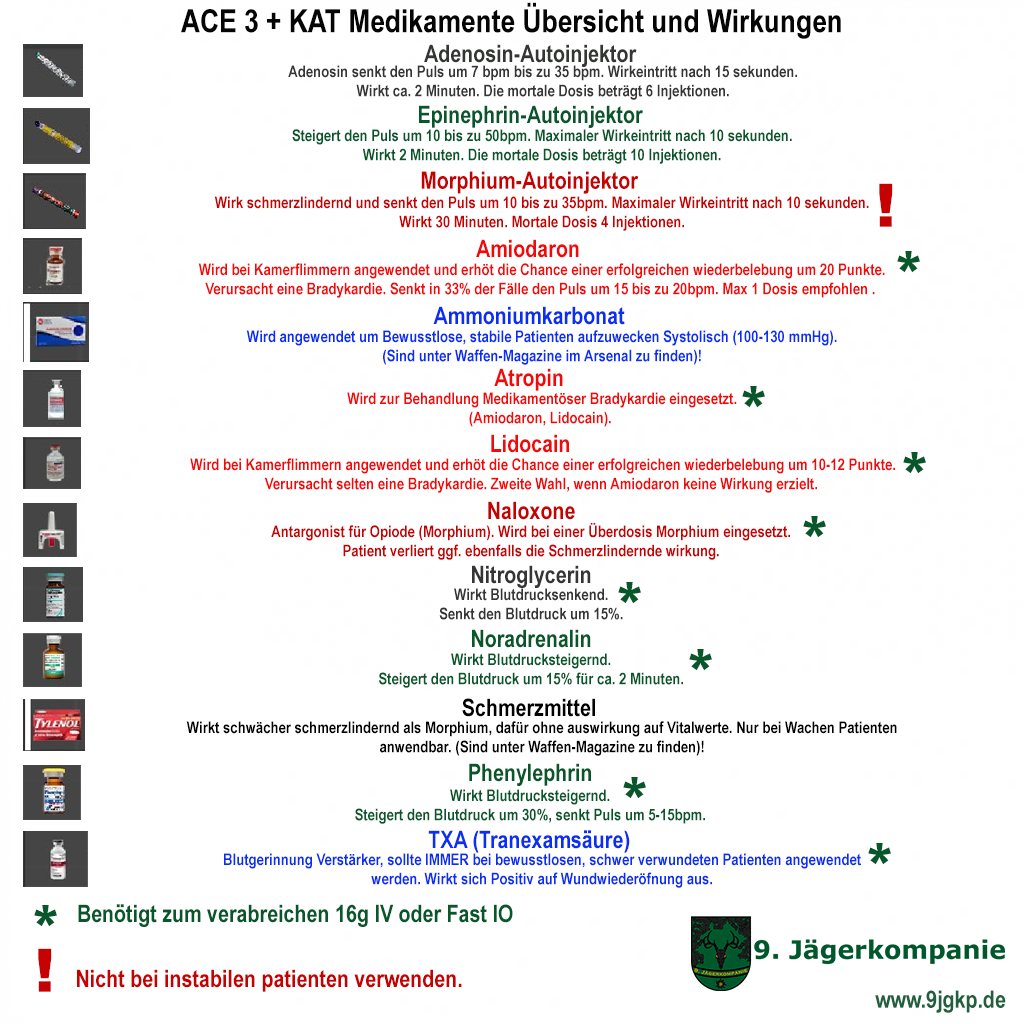
<style>
.page{position:relative;width:1024px;height:1024px;background:#ffffff}
.page>*{position:absolute;margin:0}
.t1{font:32.1px "ArialNarrow-Bold";color:#040504}
.t2{font:24px "ArialNarrow-Bold";color:#333633}
.t3{font:16px "ArialNarrow-Bold";color:#333633}
.t4{font:24px "ArialNarrow-Bold";color:#06572b}
.t5{font:16px "ArialNarrow-Bold";color:#06582b}
.t6{font:24px "ArialNarrow-Bold";color:#c60101}
.t7{font:60px "Arial-Black";color:#c60101}
.t8{font:16px "ArialNarrow-Bold";color:#c60101}
.t9{font:24px "ArialNarrow-Bold";color:#f20909}
.t10{font:60px "Arial-Black";color:#06582b}
.t11{font:16px "ArialNarrow-Bold";color:#f20909}
.t12{font:24px "ArialNarrow-Bold";color:#092ff2}
.t13{font:16px "ArialNarrow-Bold";color:#092ff2}
.t14{font:24px "ArialNarrow-Bold";color:#06582b}
.t15{font:24px "ArialNarrow-Bold";color:#000000}
.t16{font:16px "ArialNarrow-Bold";color:#000000}
.t17{font:24px "ArialNarrow-Bold";color:#20603d}
</style>
<div class="page">
<p class="t1" style="left:181px;top:2px;width:660px;height:37px">ACE 3 + KAT Medikamente Übersicht und Wirkungen</p>
<p class="t2" style="left:424px;top:44px;width:213px;height:23px">Adenosin-Autoinjektor</p>
<p class="t3" style="left:288px;top:65px;width:509px;height:35px;text-align:center">Adenosin senkt den Puls um 7 bpm bis zu 35 bpm. Wirkeintritt nach 15 sekunden.<br>Wirkt ca. 2 Minuten. Die mortale Dosis beträgt 6 Injektionen.</p>
<p class="t4" style="left:419px;top:105px;width:224px;height:23px">Epinephrin-Autoinjektor</p>
<p class="t5" style="left:292px;top:129px;width:500px;height:35px;text-align:center">Steigert den Puls um 10 bis zu 50bpm. Maximaler Wirkeintritt nach 10 sekunden.<br>Wirkt 2 Minuten. Die mortale Dosis beträgt 10 Injektionen.</p>
<p class="t6" style="left:421px;top:171px;width:218px;height:23px">Morphium-Autoinjektor</p>
<p class="t7" style="left:879px;top:183px;width:14px;height:44px">!</p>
<p class="t8" style="left:214px;top:196px;width:655px;height:35px;text-align:center">Wirk schmerzlindernd und senkt den Puls um 10 bis zu 35bpm. Maximaler Wirkeintritt nach 10 sekunden.<br>Wirkt 30 Minuten. Mortale Dosis 4 Injektionen.</p>
<p class="t9" style="left:476px;top:239px;width:103px;height:19px">Amiodaron</p>
<p class="t10" style="left:897px;top:251px;width:23px;height:22px">*</p>
<p class="t11" style="left:198px;top:263px;width:687px;height:35px;text-align:center">Wird bei Kamerflimmern angewendet und erhöt die Chance einer erfolgreichen wiederbelebung um 20 Punkte.<br>Verursacht eine Bradykardie. Senkt in 33% der Fälle den Puls um 15 bis zu 20bpm. Max 1 Dosis empfohlen .</p>
<p class="t12" style="left:433px;top:306px;width:192px;height:19px">Ammoniumkarbonat</p>
<p class="t13" style="left:246px;top:330px;width:591px;height:35px;text-align:center">Wird angewendet um Bewusstlose, stabile Patienten aufzuwecken Systolisch (100-130 mmHg).<br>(Sind unter Waffen-Magazine im Arsenal zu finden)!</p>
<p class="t9" style="left:494px;top:368px;width:69px;height:23px">Atropin</p>
<p class="t10" style="left:742px;top:386px;width:23px;height:22px">*</p>
<p class="t11" style="left:347px;top:392px;width:390px;height:35px;text-align:center">Wird zur Behandlung Medikamentöser Bradykardie eingesetzt.<br>(Amiodaron, Lidocain).</p>
<p class="t9" style="left:491px;top:434px;width:78px;height:19px">Lidocain</p>
<p class="t11" style="left:190px;top:458px;width:705px;height:35px;text-align:center">Wird bei Kamerflimmern angewendet und erhöt die Chance einer erfolgreichen wiederbelebung um 10-12 Punkte.<br>Verursacht selten eine Bradykardie. Zweite Wahl, wenn Amiodaron keine Wirkung erzielt.</p>
<p class="t10" style="left:903px;top:452px;width:23px;height:22px">*</p>
<p class="t6" style="left:488px;top:501px;width:87px;height:19px">Naloxone</p>
<p class="t10" style="left:803px;top:516px;width:23px;height:22px">*</p>
<p class="t8" style="left:271px;top:523px;width:519px;height:37px;text-align:center">Antargonist für Opiode (Morphium). Wird bei einer Überdosis Morphium eingesetzt.<br>Patient verliert ggf. ebenfalls die Schmerzlindernde wirkung.</p>
<p class="t2" style="left:472px;top:565px;width:119px;height:23px">Nitroglycerin</p>
<p class="t10" style="left:618px;top:582px;width:23px;height:22px">*</p>
<p class="t3" style="left:439px;top:588px;width:184px;height:32px;text-align:center">Wirkt Blutdrucksenkend.<br>Senkt den Blutdruck um 15%.</p>
<p class="t14" style="left:472px;top:629px;width:119px;height:19px">Noradrenalin</p>
<p class="t5" style="left:379px;top:653px;width:304px;height:35px;text-align:center">Wirkt Blutdrucksteigernd.<br>Steigert den Blutdruck um 15% für ca. 2 Minuten.</p>
<p class="t10" style="left:689px;top:649px;width:23px;height:22px">*</p>
<p class="t15" style="left:462px;top:698px;width:133px;height:19px">Schmerzmittel</p>
<p class="t16" style="left:186px;top:721px;width:711px;height:35px;text-align:center">Wirkt schwächer schmerzlindernd als Morphium, dafür ohne auswirkung auf Vitalwerte. Nur bei Wachen Patienten<br>anwendbar. (Sind unter Waffen-Magazine zu finden)!</p>
<p class="t14" style="left:469px;top:763px;width:122px;height:23px">Phenylephrin</p>
<p class="t10" style="left:623px;top:777px;width:23px;height:22px">*</p>
<p class="t5" style="left:355px;top:789px;width:350px;height:35px;text-align:center">Wirkt Blutdrucksteigernd.<br>Steigert den Blutdruck um 30%, senkt Puls um 5-15bpm.</p>
<p class="t12" style="left:428px;top:830px;width:202px;height:23px">TXA (Tranexamsäure)</p>
<p class="t10" style="left:868px;top:843px;width:23px;height:22px">*</p>
<p class="t13" style="left:224px;top:853px;width:637px;height:35px;text-align:center">Blutgerinnung Verstärker, sollte IMMER bei bewusstlosen, schwer verwundeten Patienten angewendet<br>werden. Wirkt sich Positiv auf Wundwiederöfnung aus.</p>
<p class="t10" style="left:34px;top:905px;width:23px;height:22px">*</p>
<p class="t14" style="left:78px;top:904px;width:435px;height:23px">Benötigt zum verabreichen 16g IV oder Fast IO</p>
<p class="t7" style="left:38px;top:948px;width:14px;height:44px">!</p>
<p class="t6" style="left:77px;top:969px;width:385px;height:23px">Nicht bei instabilen patienten verwenden.</p>
<p class="t17" style="left:875px;top:990px;width:131px;height:23px">www.9jgkp.de</p>
</div>
